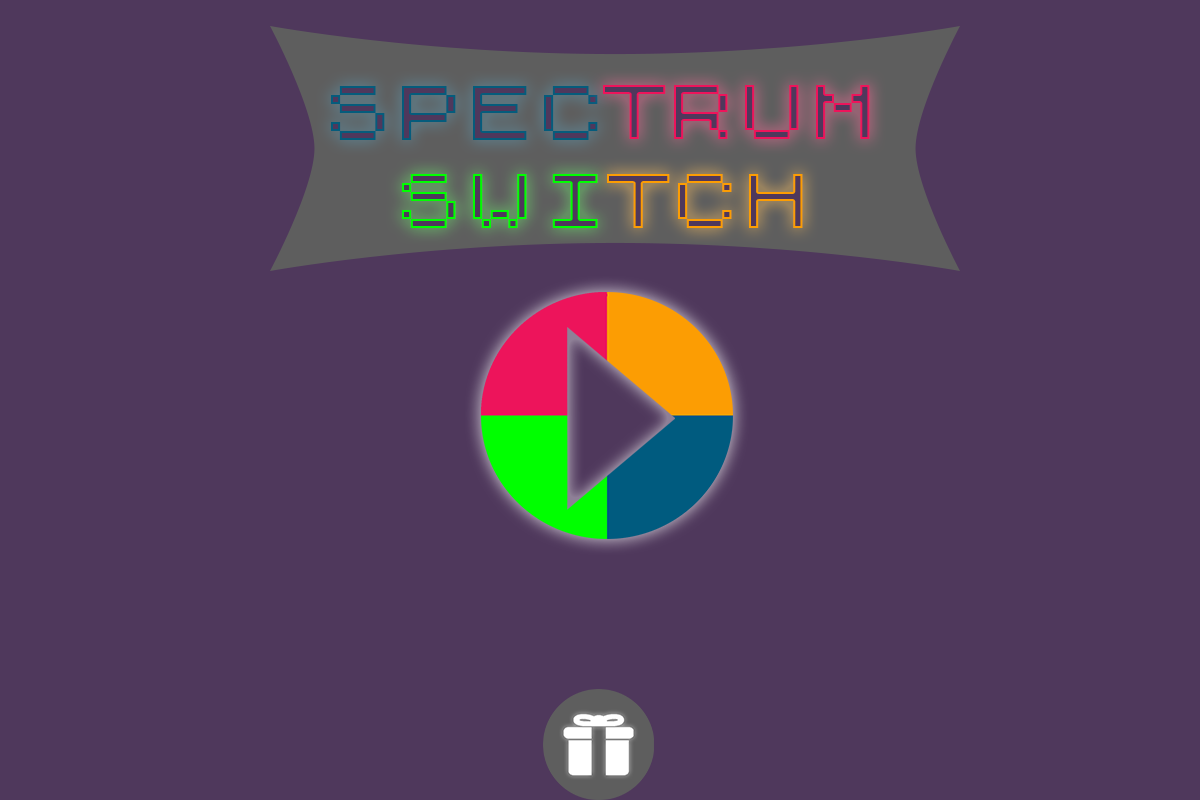
<style>
.page{position:relative;width:1200px;height:800px;background:#4f385c}
.page>*{position:absolute;margin:0}
.t1{font:72px "ZXSpectrum"}
</style>
<div class="page">
<p class="t1" style="left:331px;top:86px;width:267px;height:54px">SPEC</p>
<p class="t1" style="left:603px;top:85px;width:267px;height:54px">TRUM</p>
<p class="t1" style="left:402px;top:174px;width:196px;height:54px">SWI</p>
<p class="t1" style="left:607px;top:174px;width:196px;height:54px">TCH</p>
</div>
